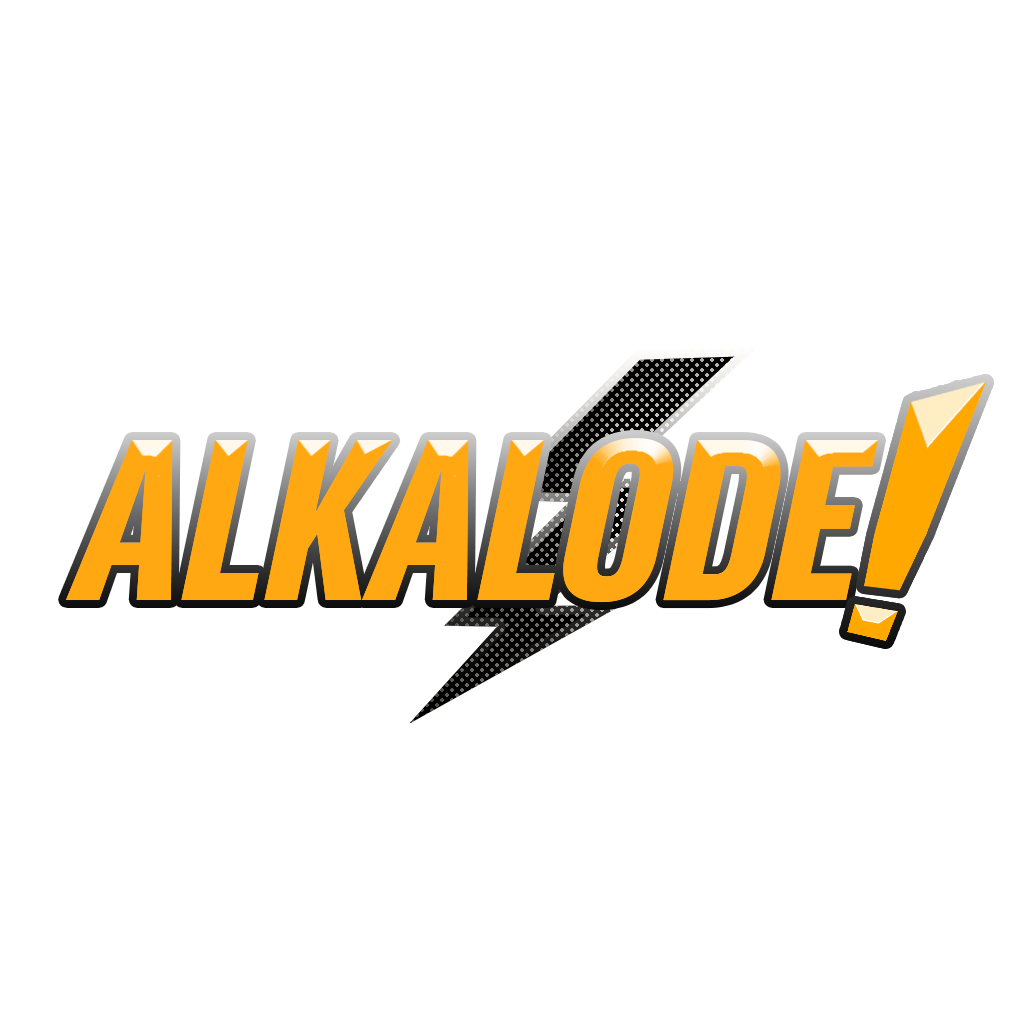
<style>
.page{position:relative;width:1024px;height:1024px;background:#ffffff}
.page>*{position:absolute;margin:0}
.t1{font:221px "GoodPro-XCondBlack";color:#ffa812;font-style:italic;scale:1.19 1}
</style>
<div class="page">
<p class="t1" style="left:66px;top:438px;width:813px;height:165px">ALKALODE</p>
</div>
